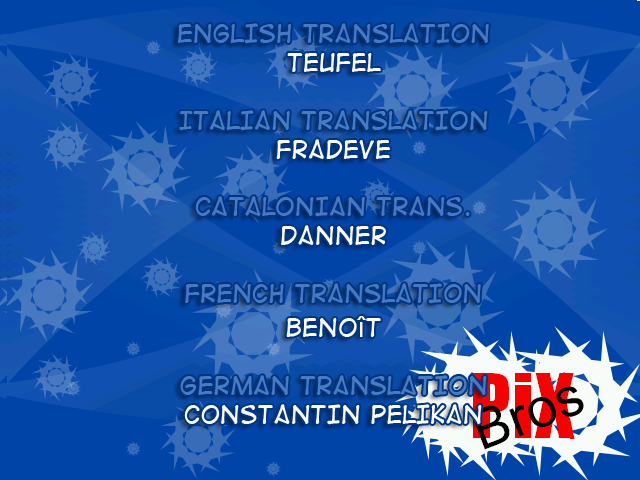
<style>
.page{position:relative;width:640px;height:480px;background:#0044a8}
.page>*{position:absolute;margin:0}
.t1{font:24px "DigitalStrip2";color:#4878c0}
.t2{font:24px "DigitalStrip2";color:#ffffff}
.t3{font:24px "DigitalStrip2";color:#487cc0}
.t4{font:29px "ArialMT";color:#ffffff}
</style>
<div class="page">
<p class="t1" style="left:178px;top:23px;width:311px;height:402px;text-align:center">English translation<br><span class="t2">TeuFel<br><br></span><span class="t3">Italian translation<br></span><span class="t2">Fradeve<br><br></span>catalonian trans.<br><span class="t2">danner<br><br></span>French translation<br><span class="t2">Beno</span><span class="t4">î</span><span class="t2">t <br><br></span><span class="t3">German translation<br></span><span class="t2">constantin pelikan</span></p>
</div>
